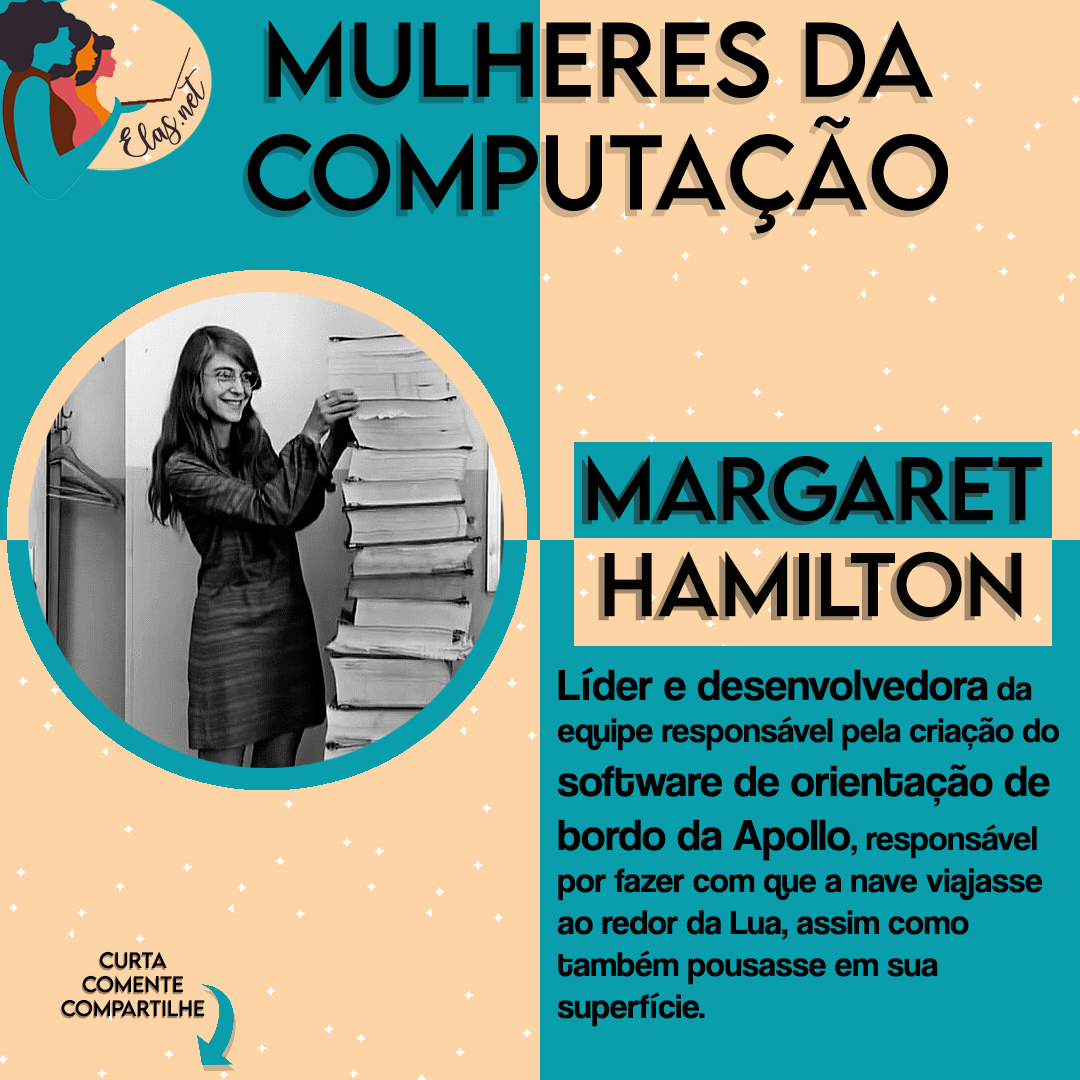
<style>
.page{position:relative;width:1080px;height:1080px;background:#fcd4a5}
.page>*{position:absolute;margin:0}
.t1{font:94px "LEMONMILK-Regular"}
.t2{font:25px "charlinda-Regular";color:#2f262f;scale:1.18 1}
.t3{font:80px "LEMONMILK-Regular"}
.t4{font:80px "LEMONMILK-Regular";color:#000000}
.t5{font:35px "CoolveticaRg-Regular";color:#000000}
.t6{font:45px "CoolveticaRg-Regular";color:#000000}
.t7{font:20px "LEMONMILK-Regular"}
.t8{font:20px "LEMONMILK-Regular";color:#000000}
</style>
<div class="page">
<p class="t1" style="left:242px;top:27px;width:701px;height:213px;text-align:center">Mulheres da<br>Computação</p>
<p class="t2" style="left:119px;top:68px;width:86px;height:89px;rotate:-43deg">Elas.net</p>
<p class="t3" style="left:582px;top:459px;width:455px;height:163px;text-align:center">Margaret<br>Hamilton</p>
<p class="t4" style="left:588px;top:455px;width:455px;height:163px;text-align:center">Margaret<br>Hamilton</p>
<p class="t5" style="left:557px;top:667px;width:502px;height:360px"><span class="t6">Líder e desenvolvedora</span> da <br>equipe responsável pela criação do <br><span class="t6">software de orientação de <br>bordo da Apollo</span>, responsável <br>por fazer com que a nave viajasse <br>ao redor da Lua, assim como <br>também pousasse em sua <br>superfície.</p>
<p class="t7" style="left:60px;top:953px;width:144px;height:66px;text-align:center">Curta<br>Comente<br>Compartilhe</p>
<p class="t8" style="left:61px;top:951px;width:144px;height:66px;text-align:center">Curta<br>Comente<br>Compartilhe</p>
</div>
